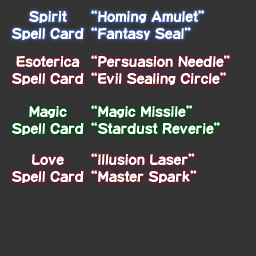
<style>
.page{position:relative;width:256px;height:256px;background:#333333}
.page>*{position:absolute;margin:0}
.t1{font:14px/17px "DFPOP1-W12-WINP-RKSJ-H";color:#ffffff}
</style>
<div class="page">
<p class="t1" style="left:11px;top:11px;width:73px;height:29px;text-align:center">Spirit<br>Spell Card</p>
<p class="t1" style="left:91px;top:10px;width:113px;height:30px">“Homing Amulet”<br>“Fantasy Seal”</p>
<p class="t1" style="left:11px;top:56px;width:73px;height:29px;text-align:center">Esoterica<br>Spell Card</p>
<p class="t1" style="left:91px;top:55px;width:139px;height:30px">“Persuasion Needle”<br>“Evil Sealing Circle”</p>
<p class="t1" style="left:11px;top:106px;width:73px;height:29px;text-align:center">Magic<br>Spell Card</p>
<p class="t1" style="left:91px;top:105px;width:129px;height:29px">“Magic Missile”<br>“Stardust Reverie”</p>
<p class="t1" style="left:11px;top:154px;width:73px;height:29px;text-align:center">Love<br>Spell Card</p>
<p class="t1" style="left:91px;top:153px;width:106px;height:30px">“Illusion Laser”<br>“Master Spark”</p>
</div>
